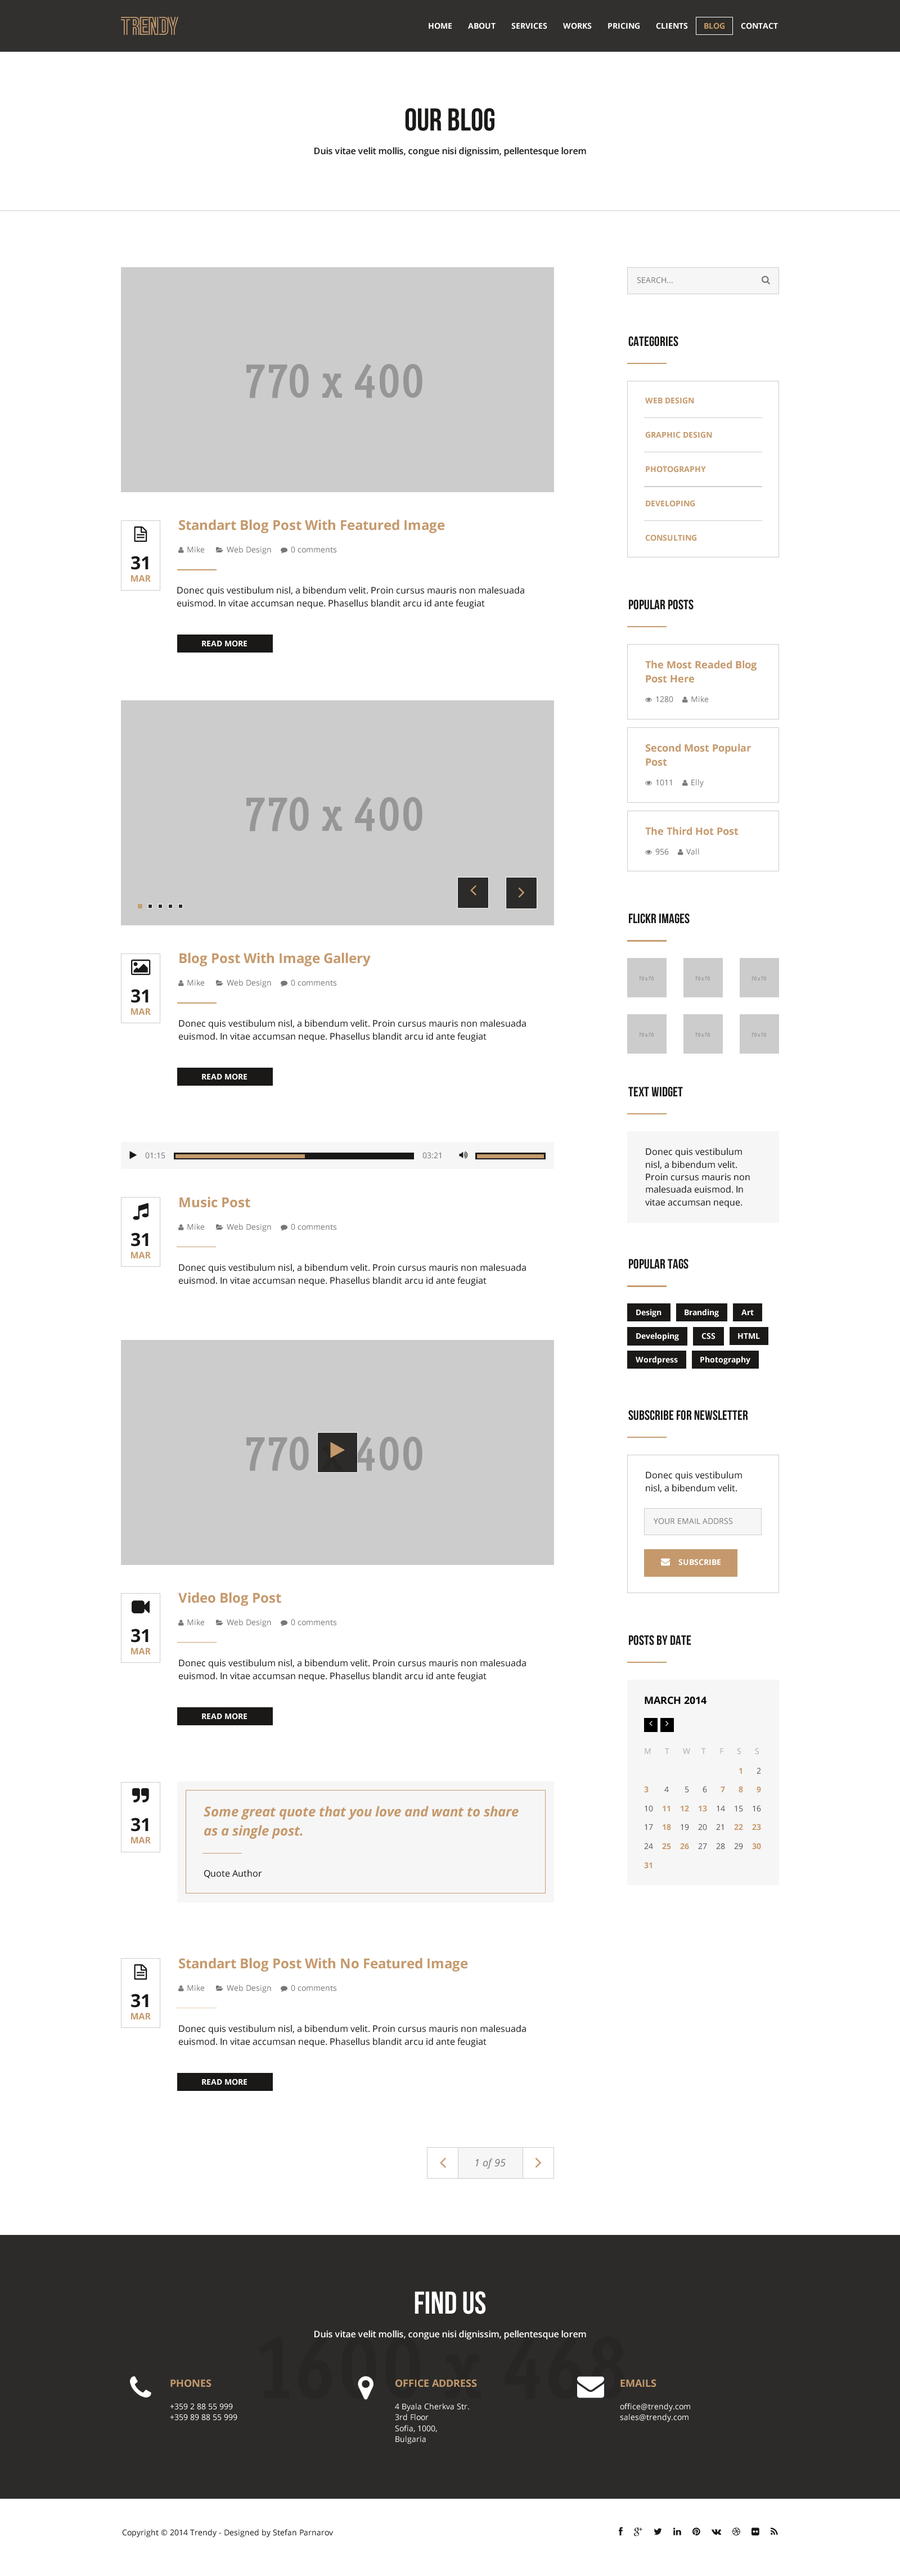
<style>
.page{position:relative;width:900px;height:2564px;background:#ffffff}
.page>*{position:absolute;margin:0}
.t1{font:7.9px "OpenSans-Bold";color:#ffffff}
.t2{font:7.9px "OpenSans-Bold";color:#c59966}
.t3{font:31.5px "BebasNeue";color:#191918}
.t4{font:9px "OpenSans-Semibold";color:#1a1918}
.t5{font:7.9px "OpenSans";color:#777777}
.t6{font:13.5px "BebasNeue";color:#191918}
.t7{font:7.9px "OpenSans-Bold";color:#c5996c}
.t8{font:13.5px "OpenSans-Bold";color:#c5996c}
.t9{font:18px "OpenSans-Bold";color:#191918}
.t10{font:9px "OpenSans-Bold";color:#c5996c}
.t11{font:9px/12.6px "OpenSans";color:#191918}
.t12{font:10.1px/14.2px "OpenSans-Bold";color:#c5996c}
.t13{font:10.1px "OpenSans-Bold";color:#c5996c}
.t14{font:10.1px "OpenSans-Bold";color:#000000}
.t15{font:7.9px "OpenSans";color:#a9a9a9}
.t16{font:7.9px/9.5px "OpenSans";color:#525252}
.t17{font:7.9px/9.5px "OpenSans-Bold";color:#c6996a}
.t18{font:13.5px/18.9px "OpenSans-BoldItalic";color:#c5996c}
.t19{font:9px "OpenSans";color:#191918}
.t20{font:10.1px "OpenSans-Italic";color:#777777}
.t21{font:31.5px "BebasNeue";color:#ffffff}
.t22{font:9px "OpenSans-Semibold";color:#ffffff}
.t23{font:7.9px/11px "OpenSans";color:#ffffff}
.t24{font:7.9px "OpenSans";color:#191918}
</style>
<div class="page">
<p class="t1" style="left:429px;top:22px;width:349px;height:7px">HOME       ABOUT       SERVICES       WORKS       PRICING       CLIENTS       <span class="t2">BLOG       </span>CONTACT</p>
<p class="t3" style="left:405px;top:108px;width:89px;height:23px">OUR BLOG</p>
<p class="t4" style="left:314px;top:147px;width:272px;height:9px">Duis vitae velit mollis, congue nisi dignissim, pellentesque lorem</p>
<p class="t5" style="left:637px;top:277px;width:36px;height:7px">SEARCH...</p>
<p class="t6" style="left:628px;top:336px;width:50px;height:10px">CATEGORIES</p>
<p class="t7" style="left:645px;top:397px;width:49px;height:7px">WEB DESIGN</p>
<p class="t7" style="left:645px;top:431px;width:67px;height:7px">GRAPHIC DESIGN</p>
<p class="t7" style="left:646px;top:466px;width:60px;height:6px">PHOTOGRAPHY</p>
<p class="t7" style="left:646px;top:500px;width:49px;height:7px">DEVELOPING</p>
<p class="t8" style="left:179px;top:519px;width:266px;height:14px">Standart Blog Post With Featured Image</p>
<p class="t7" style="left:645px;top:534px;width:51px;height:7px">CONSULTING</p>
<p class="t9" style="left:131px;top:556px;width:17px;height:14px">31</p>
<p class="t10" style="left:131px;top:575px;width:20px;height:7px">MAR</p>
<p class="t11" style="left:177px;top:586px;width:347px;height:23px">Donec quis vestibulum nisl, a bibendum velit. Proin cursus mauris non malesuada euismod. In vitae accumsan neque. Phasellus blandit arcu id ante feugiat</p>
<p class="t6" style="left:629px;top:600px;width:65px;height:10px">Popular Posts</p>
<p class="t1" style="left:202px;top:640px;width:45px;height:7px">READ MORE</p>
<p class="t12" style="left:645px;top:660px;width:112px;height:23px">The Most Readed Blog Post Here</p>
<p class="t12" style="left:645px;top:744px;width:106px;height:22px">Second Most Popular Post</p>
<p class="t13" style="left:645px;top:827px;width:94px;height:8px">The Third Hot Post</p>
<p class="t6" style="left:629px;top:914px;width:61px;height:10px">FLICKR IMAGES</p>
<p class="t8" style="left:179px;top:952px;width:192px;height:14px">Blog Post With Image Gallery</p>
<p class="t9" style="left:131px;top:989px;width:17px;height:14px">31</p>
<p class="t10" style="left:131px;top:1008px;width:20px;height:7px">MAR</p>
<p class="t11" style="left:179px;top:1019px;width:347px;height:23px">Donec quis vestibulum nisl, a bibendum velit. Proin cursus mauris non malesuada euismod. In vitae accumsan neque. Phasellus blandit arcu id ante feugiat</p>
<p class="t1" style="left:202px;top:1073px;width:45px;height:7px">READ MORE</p>
<p class="t6" style="left:628px;top:1087px;width:55px;height:10px">TEXT WIDGET</p>
<p class="t5" style="left:145px;top:1152px;width:20px;height:7px">01:15</p>
<p class="t5" style="left:422px;top:1152px;width:19px;height:7px">03:21</p>
<p class="t11" style="left:645px;top:1148px;width:105px;height:60px">Donec quis vestibulum nisl, a bibendum velit. Proin cursus mauris non malesuada euismod. In vitae accumsan neque.</p>
<p class="t8" style="left:179px;top:1196px;width:71px;height:12px">Music Post</p>
<p class="t9" style="left:131px;top:1232px;width:17px;height:14px">31</p>
<p class="t10" style="left:131px;top:1252px;width:20px;height:6px">MAR</p>
<p class="t11" style="left:179px;top:1263px;width:347px;height:23px">Donec quis vestibulum nisl, a bibendum velit. Proin cursus mauris non malesuada euismod. In vitae accumsan neque. Phasellus blandit arcu id ante feugiat</p>
<p class="t6" style="left:629px;top:1259px;width:59px;height:10px">POPULAR TAGS</p>
<p class="t1" style="left:636px;top:1309px;width:26px;height:8px">Design</p>
<p class="t1" style="left:685px;top:1309px;width:34px;height:8px">Branding</p>
<p class="t1" style="left:741px;top:1310px;width:13px;height:6px">Art</p>
<p class="t1" style="left:636px;top:1333px;width:43px;height:8px">Developing</p>
<p class="t1" style="left:701px;top:1333px;width:15px;height:6px">CSS</p>
<p class="t1" style="left:738px;top:1333px;width:22px;height:6px">HTML</p>
<p class="t1" style="left:636px;top:1356px;width:42px;height:9px">Wordpress</p>
<p class="t1" style="left:700px;top:1356px;width:50px;height:9px">Photography</p>
<p class="t6" style="left:628px;top:1410px;width:120px;height:10px">SUBSCRIBE FOR NEWSLETTER</p>
<p class="t11" style="left:646px;top:1471px;width:96px;height:22px">Donec quis vestibulum nisl, a bibendum velit.</p>
<p class="t5" style="left:654px;top:1518px;width:78px;height:6px">YOUR EMAIL ADDRSS</p>
<p class="t1" style="left:678px;top:1559px;width:43px;height:6px">SUBSCRIBE</p>
<p class="t8" style="left:178px;top:1592px;width:103px;height:14px">Video Blog Post</p>
<p class="t9" style="left:131px;top:1628px;width:17px;height:14px">31</p>
<p class="t6" style="left:629px;top:1635px;width:62px;height:10px">POSTS BY DATE</p>
<p class="t10" style="left:131px;top:1648px;width:20px;height:6px">MAR</p>
<p class="t11" style="left:179px;top:1659px;width:347px;height:22px">Donec quis vestibulum nisl, a bibendum velit. Proin cursus mauris non malesuada euismod. In vitae accumsan neque. Phasellus blandit arcu id ante feugiat</p>
<p class="t14" style="left:645px;top:1696px;width:61px;height:8px">MARCH 2014</p>
<p class="t1" style="left:202px;top:1713px;width:45px;height:7px">READ MORE</p>
<p class="t15" style="left:645px;top:1748px;width:114px;height:6px">M      T      W     T      F      S      S</p>
<p class="t16" style="left:644px;top:1767px;width:117px;height:102px"><span class="t17">1</span>      2<br><br><span class="t17">3</span>       4       5      6      <span class="t17">7      8      9<br></span><br>10    <span class="t17">11    12    13</span>    14    15    16<br><br>17    <span class="t17">18</span>    19    20    21    <span class="t17">22    23<br></span><br>24    <span class="t17">25    26 </span>   27    28    29    <span class="t17">30<br><br>31</span></p>
<p class="t18" style="left:204px;top:1806px;width:315px;height:33px">Some great quote that you love and want to share as a single post.</p>
<p class="t9" style="left:131px;top:1817px;width:17px;height:15px">31</p>
<p class="t10" style="left:131px;top:1837px;width:20px;height:6px">MAR</p>
<p class="t19" style="left:204px;top:1869px;width:58px;height:9px">Quote Author</p>
<p class="t8" style="left:179px;top:1958px;width:289px;height:14px">Standart Blog Post With No Featured Image</p>
<p class="t9" style="left:131px;top:1994px;width:17px;height:14px">31</p>
<p class="t10" style="left:131px;top:2013px;width:20px;height:6px">MAR</p>
<p class="t11" style="left:179px;top:2024px;width:347px;height:23px">Donec quis vestibulum nisl, a bibendum velit. Proin cursus mauris non malesuada euismod. In vitae accumsan neque. Phasellus blandit arcu id ante feugiat</p>
<p class="t1" style="left:202px;top:2078px;width:45px;height:7px">READ MORE</p>
<p class="t20" style="left:475px;top:2158px;width:31px;height:11px">1 of 95</p>
<p class="t21" style="left:415px;top:2291px;width:71px;height:23px">FIND US</p>
<p class="t22" style="left:314px;top:2330px;width:272px;height:9px">Duis vitae velit mollis, congue nisi dignissim, pellentesque lorem</p>
<p class="t13" style="left:170px;top:2379px;width:42px;height:8px">PHONES</p>
<p class="t13" style="left:395px;top:2379px;width:82px;height:8px">OFFICE ADDRESS</p>
<p class="t13" style="left:620px;top:2379px;width:36px;height:8px">EMAILS</p>
<p class="t23" style="left:170px;top:2403px;width:67px;height:17px">+359 2 88 55 999<br>+359 89 88 55 999</p>
<p class="t23" style="left:395px;top:2403px;width:74px;height:41px">4 Byala Cherkva Str.<br>3rd Floor<br>Sofia, 1000, <br>Bulgaria</p>
<p class="t23" style="left:620px;top:2403px;width:70px;height:19px">office@trendy.com<br>sales@trendy.com</p>
<p class="t24" style="left:122px;top:2529px;width:211px;height:8px">Copyright © 2014 Trendy - Designed by Stefan Parnarov</p>
</div>
